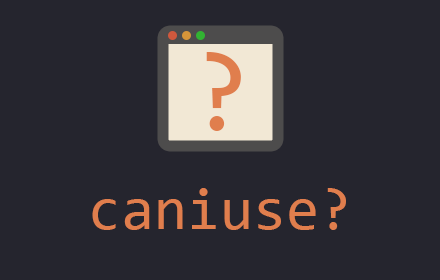
<style>
.page{position:relative;width:440px;height:280px;background:#25252e}
.page>*{position:absolute;margin:0}
.t1{font:60px "Consolas";color:#e07e4d}
</style>
<div class="page">
<p class="t1" style="left:92px;top:188px;width:254px;height:42px">caniuse?</p>
</div>
